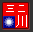
<style>
.page{position:relative;width:33px;height:32px;background:#f20000}
.page>*{position:absolute;margin:0}
.t1{font:10.4px "SimSun";color:#ffffff}
.t2{font:11.7px "SimSun";color:#ffffff}
</style>
<div class="page">
<p class="t1" style="left:6px;top:5px;width:19px;height:7px">三二</p>
<p class="t2" style="left:16px;top:15px;width:11px;height:12px">川</p>
</div>
